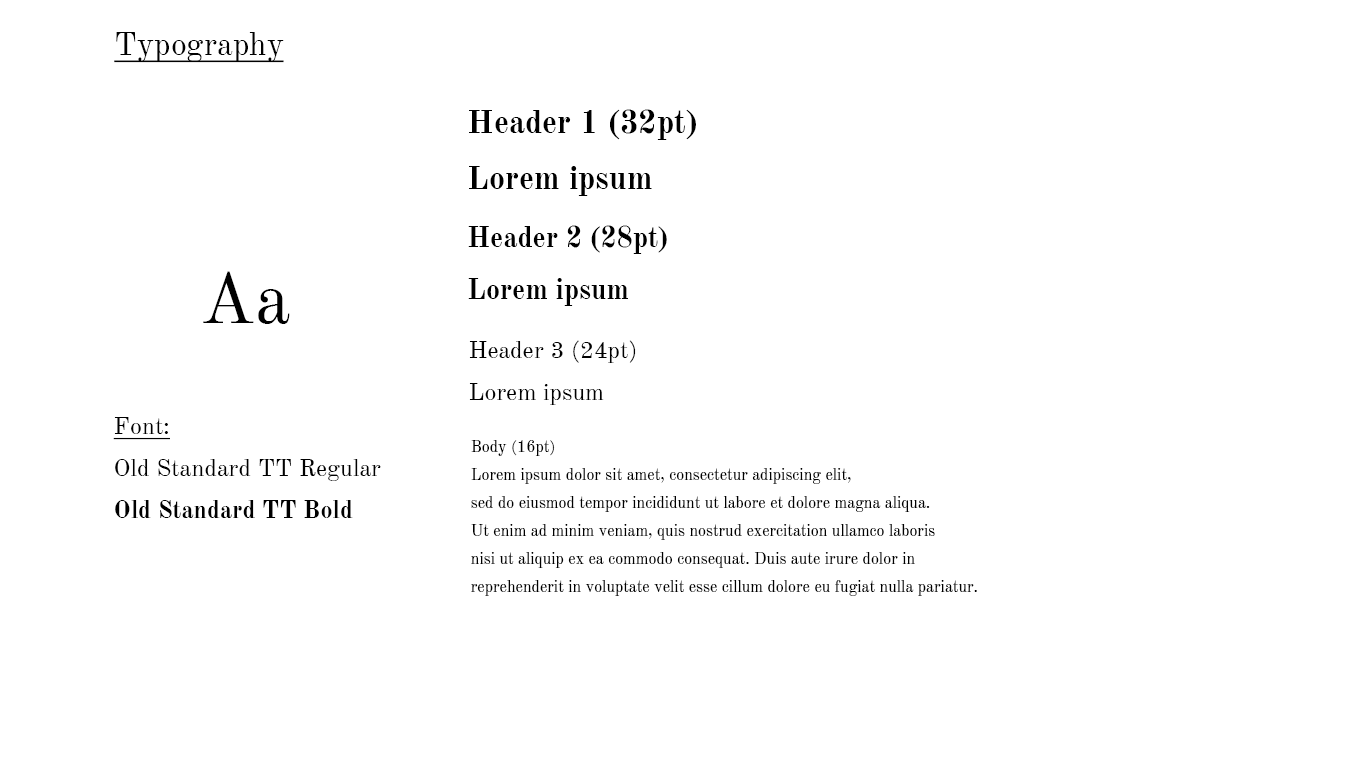
<style>
.page{position:relative;width:1366px;height:768px;background:#ffffff}
.page>*{position:absolute;margin:0}
.t1{font:32px "OldStandardTT-Regular";color:#010101;text-decoration:underline}
.t2{font:32px "OldStandardTT-Bold";color:#000000}
.t3{font:28px "OldStandardTT-Bold";color:#000000}
.t4{font:72px "OldStandardTT-Regular";color:#000000}
.t5{font:24px "OldStandardTT-Regular";color:#000000}
.t6{font:24px "OldStandardTT-Regular";color:#000000;text-decoration:underline}
.t7{font:24px "OldStandardTT-Bold";color:#000000}
.t8{font:16px "OldStandardTT-Regular";color:#000000}
</style>
<div class="page">
<p class="t1" style="left:114px;top:32px;width:170px;height:31px">Typography</p>
<p class="t2" style="left:469px;top:109px;width:227px;height:87px">Header 1 (32pt)<br>Lorem ipsum</p>
<p class="t3" style="left:468px;top:225px;width:199px;height:81px">Header 2 (28pt)<br>Lorem ipsum</p>
<p class="t4" style="left:203px;top:271px;width:87px;height:53px">Aa</p>
<p class="t5" style="left:469px;top:340px;width:167px;height:65px">Header 3 (24pt)<br>Lorem ipsum</p>
<p class="t5" style="left:113px;top:417px;width:268px;height:101px"><span class="t6">Font:<br></span>Old Standard TT Regular<br><span class="t7">Old Standard TT Bold</span></p>
<p class="t8" style="left:471px;top:440px;width:506px;height:156px">Body (16pt)<br>Lorem ipsum dolor sit amet, consectetur adipiscing elit, <br>sed do eiusmod tempor incididunt ut labore et dolore magna aliqua. <br>Ut enim ad minim veniam, quis nostrud exercitation ullamco laboris <br>nisi ut aliquip ex ea commodo consequat. Duis aute irure dolor in <br>reprehenderit in voluptate velit esse cillum dolore eu fugiat nulla pariatur.</p>
</div>
